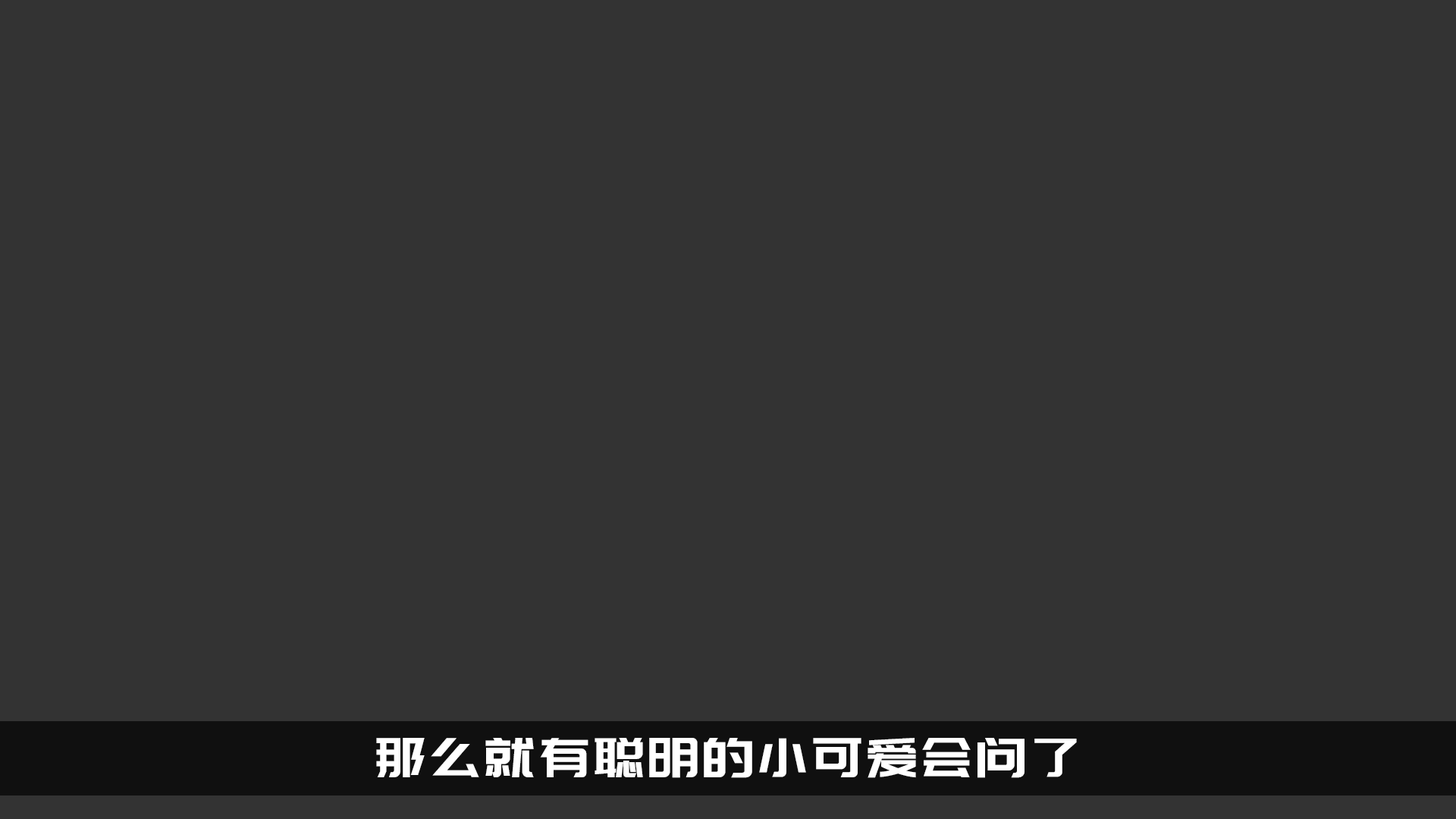
<style>
.page{position:relative;width:1456px;height:819px;background:#333333}
.page>*{position:absolute;margin:0}
.t1{font:54.6px "PangMenZhengDao-3";color:#ffffff}
</style>
<div class="page">
<p class="t1" style="left:376px;top:738px;width:701px;height:40px">那么就有聪明的小可爱会问了</p>
</div>
